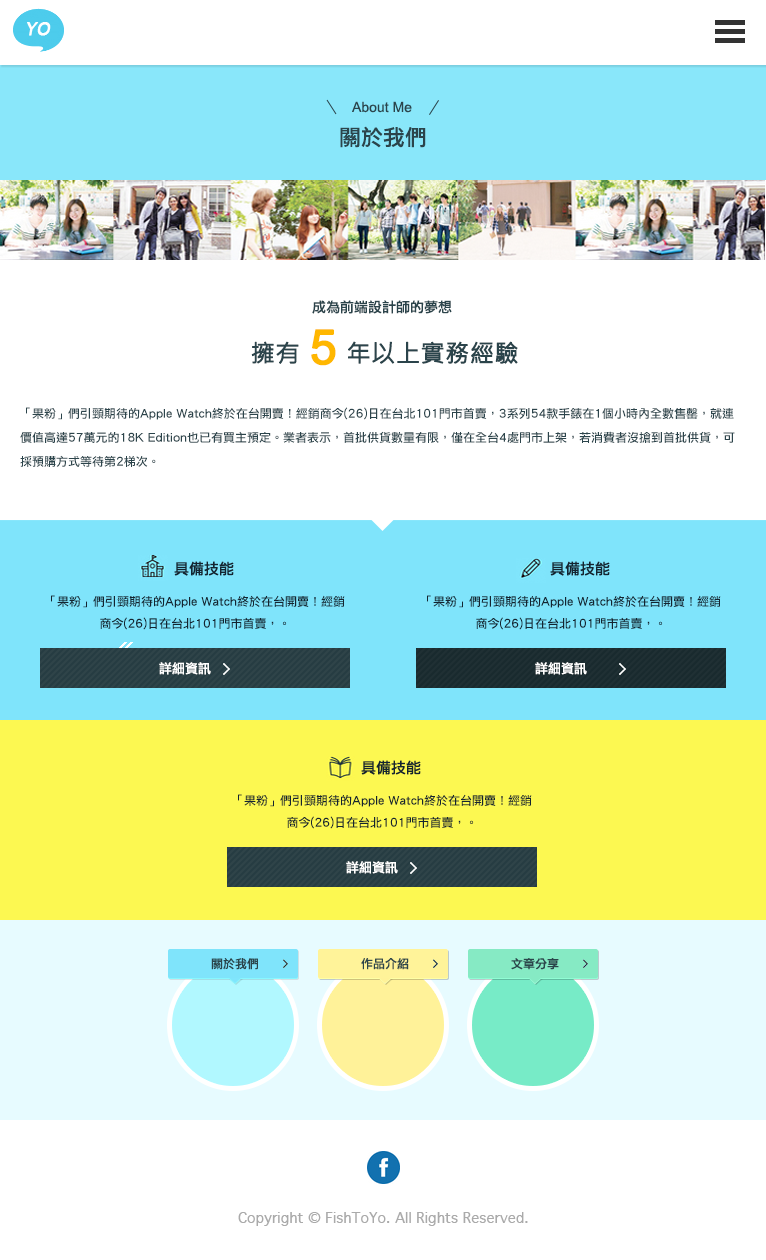
<style>
.page{position:relative;width:766px;height:1260px;background:#ffffff}
.page>*{position:absolute;margin:0}
.t1{font:14px "ArialMT";color:#2b444b}
.t2{font:22px "LiHeiPro";color:#2b444b}
.t3{font:14px "LiHeiPro";color:#2b444b}
.t4{font:48px "ArialMT";color:#ffb700;font-weight:bold}
.t5{font:24px "MicrosoftJhengHeiRegular";color:#2b444b;font-weight:bold}
.t6{font:12px/24px "LiHeiPro";color:#2b444b}
.t7{font:15px "LiHeiPro";color:#142430}
.t8{font:12px/22px "LiHeiPro";color:#142430}
.t9{font:13px "LiHeiPro";color:#ffffff}
.t10{font:12px "LiHeiPro";color:#2b454b}
</style>
<div class="page">
<p class="t1" style="left:352px;top:101px;width:60px;height:12px">About Me</p>
<p class="t2" style="left:340px;top:126px;width:86px;height:22px">關於我們</p>
<p class="t3" style="left:312px;top:300px;width:140px;height:14px">成為前端設計師的夢想</p>
<p class="t4" style="left:311px;top:329px;width:25px;height:37px">5</p>
<p class="t5" style="left:251px;top:341px;width:267px;height:23px">擁有       年以上實務經驗</p>
<p class="t6" style="left:20px;top:407px;width:715px;height:60px">「果粉」們引頸期待的Apple Watch終於在台開賣！經銷商今(26)日在台北101門市首賣，3系列54款手錶在1個小時內全數售罄，就連價值高達57萬元的18K Edition也已有買主預定。業者表示，首批供貨數量有限，僅在全台4處門市上架，若消費者沒搶到首批供貨，可採預購方式等待第2梯次。</p>
<p class="t7" style="left:174px;top:561px;width:60px;height:15px">具備技能</p>
<p class="t7" style="left:550px;top:561px;width:60px;height:15px">具備技能</p>
<p class="t8" style="left:51px;top:595px;width:294px;height:35px;text-align:center">「果粉」們引頸期待的Apple Watch終於在台開賣！經銷商今(26)日在台北101門市首賣，。</p>
<p class="t8" style="left:427px;top:595px;width:294px;height:35px;text-align:center">「果粉」們引頸期待的Apple Watch終於在台開賣！經銷商今(26)日在台北101門市首賣，。</p>
<p class="t9" style="left:159px;top:662px;width:52px;height:13px">詳細資訊</p>
<p class="t9" style="left:535px;top:662px;width:52px;height:13px">詳細資訊</p>
<p class="t7" style="left:361px;top:760px;width:60px;height:15px">具備技能</p>
<p class="t8" style="left:238px;top:794px;width:294px;height:35px;text-align:center">「果粉」們引頸期待的Apple Watch終於在台開賣！經銷商今(26)日在台北101門市首賣，。</p>
<p class="t9" style="left:346px;top:861px;width:52px;height:13px">詳細資訊</p>
<p class="t10" style="left:211px;top:958px;width:47px;height:12px">關於我們</p>
<p class="t10" style="left:361px;top:958px;width:48px;height:12px">作品介紹</p>
<p class="t10" style="left:511px;top:958px;width:48px;height:12px">文章分享</p>
</div>
